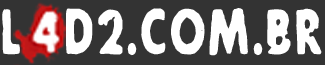
<style>
.page{position:relative;width:325px;height:65px;background:#333333}
.page>*{position:absolute;margin:0}
.t1{font:63.2px "Future-Rot";letter-spacing:0.029em;color:#ffffff;scale:0.68 1}
</style>
<div class="page">
<p class="t1" style="left:2px;top:8px;width:320px;height:48px">L  D2.COM.BR</p>
</div>
